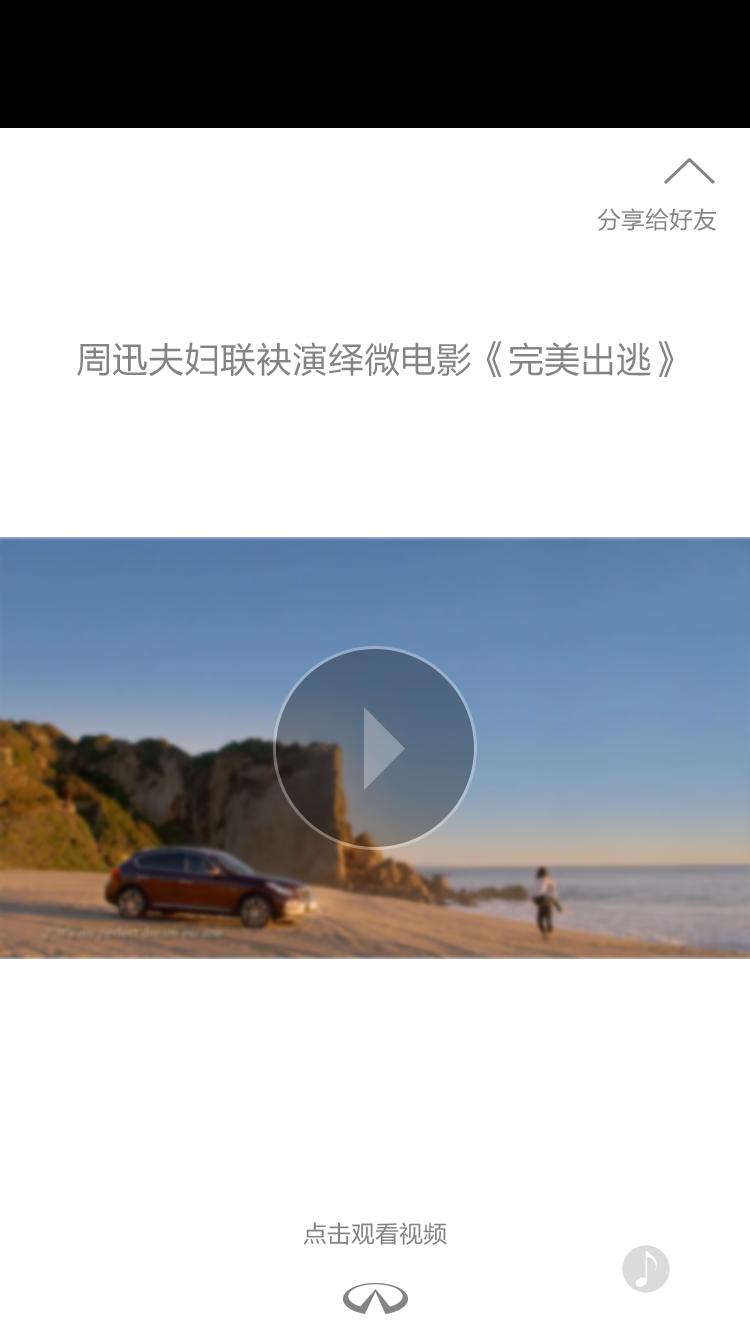
<style>
.page{position:relative;width:750px;height:1334px;background:#ffffff}
.page>*{position:absolute;margin:0}
.t1{font:24px "FZLTHK--GBK1-0";color:#848484}
.t2{font:36px "FZLTHK--GBK1-0";color:#848484}
</style>
<div class="page">
<p class="t1" style="left:597px;top:208px;width:119px;height:23px">分享给好友</p>
<p class="t2" style="left:77px;top:341px;width:597px;height:36px">周迅夫妇联袂演绎微电影《完美出逃》</p>
<p class="t1" style="left:303px;top:1222px;width:144px;height:23px">点击观看视频</p>
</div>
